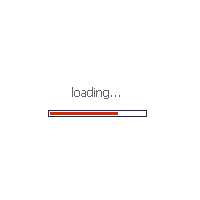
<style>
.page{position:relative;width:200px;height:200px;background:#ffffff}
.page>*{position:absolute;margin:0}
.t1{font:12px "Tahoma";color:#636363}
</style>
<div class="page">
<p class="t1" style="left:72px;top:87px;width:48px;height:12px">loading...</p>
</div>
